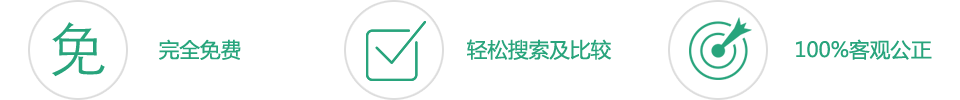
<style>
.page{position:relative;width:960px;height:100px;background:#ffffff}
.page>*{position:absolute;margin:0}
.t1{font:20.6px "MicrosoftYaHei";color:#28a57c}
.t2{font:20.6px "MicrosoftYaHei";color:#28a47c}
</style>
<div class="page">
<p class="t1" style="left:159px;top:39px;width:82px;height:21px">完全免费</p>
<p class="t2" style="left:467px;top:39px;width:145px;height:21px">轻松搜索及比较</p>
<p class="t2" style="left:796px;top:39px;width:136px;height:21px">100%客观公正</p>
</div>
